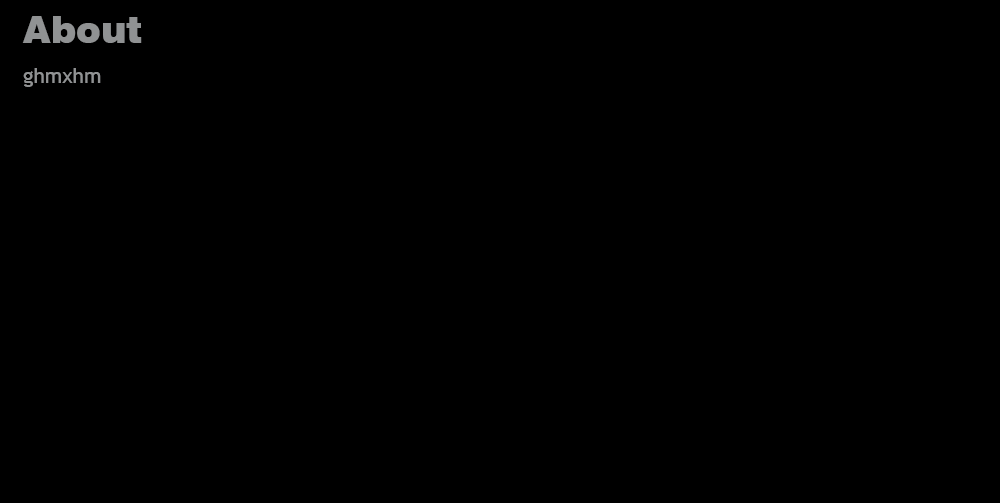
<style>
.page{position:relative;width:1000px;height:503px;background:#000000}
.page>*{position:absolute;margin:0}
.t1{font:37.5px "Swiss721BT-Black";color:#909293}
.t2{font:20.8px "TrebuchetMS";color:#909293}
</style>
<div class="page">
<p class="t1" style="left:22px;top:16px;width:120px;height:27px">About</p>
<p class="t2" style="left:23px;top:68px;width:78px;height:19px">ghmxhm</p>
</div>
